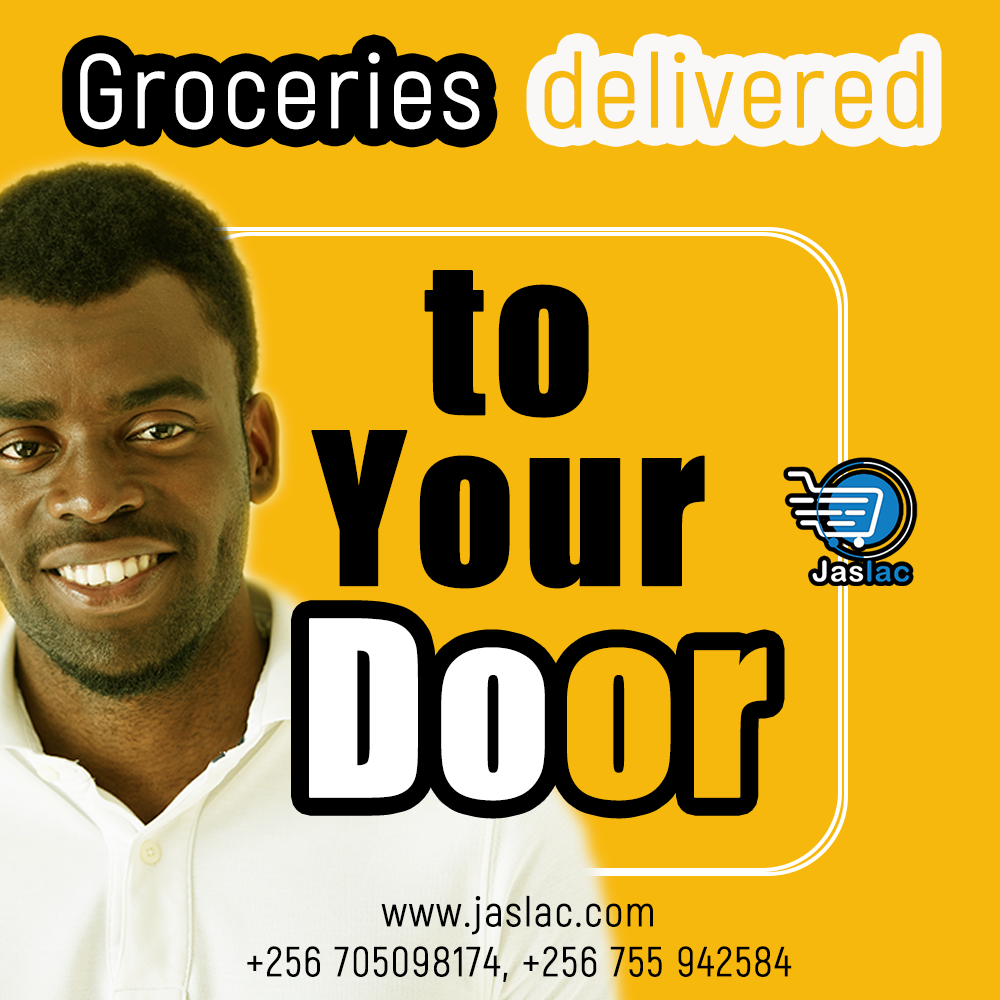
<style>
.page{position:relative;width:1000px;height:1000px;background:#f7b80e}
.page>*{position:absolute;margin:0}
.t1{font:104.2px "Akrobat-Regular";letter-spacing:0.02em;color:#ffffff;font-weight:bold}
.t2{font:104.2px "Akrobat-Regular";letter-spacing:0.02em;color:#f7b80e;font-weight:bold}
.t3{font:195.8px/170.8px "Impact";letter-spacing:0.02em;color:#000000;font-weight:bold}
.t4{font:225px "Impact";letter-spacing:0.02em;color:#ffffff;font-weight:bold}
.t5{font:225px "Impact";letter-spacing:0.02em;color:#f7b80e;font-weight:bold}
.t6{font:41.7px/50px "Akrobat-Regular";letter-spacing:0.02em;color:#000000;font-weight:bold}
</style>
<div class="page">
<p class="t1" style="left:80px;top:52px;width:400px;height:78px">Groceries</p>
<p class="t2" style="left:544px;top:51px;width:380px;height:78px">delivered</p>
<p class="t3" style="left:311px;top:270px;width:394px;height:319px;text-align:center">to<br>Your</p>
<p class="t4" style="left:309px;top:618px;width:458px;height:183px">Do<span class="t5">or</span></p>
<p class="t6" style="left:247px;top:895px;width:545px;height:87px;text-align:center">www.jaslac.com<br>+256 705098174, +256 755 942584</p>
</div>
